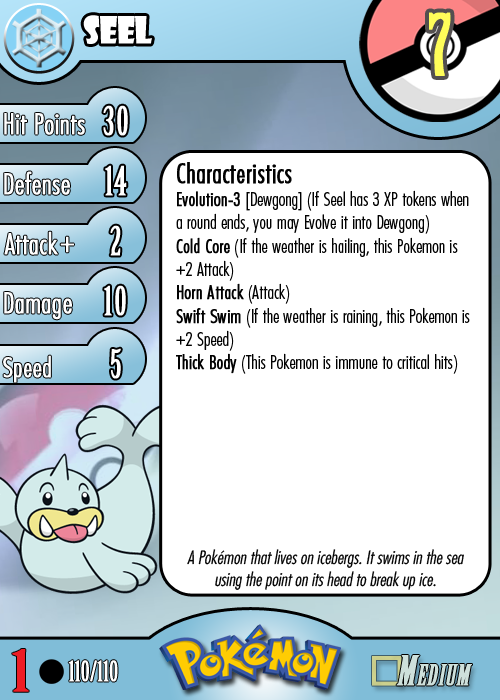
<style>
.page{position:relative;width:500px;height:700px;background:#ffffff}
.page>*{position:absolute;margin:0}
.t1{font:36.7px "ShowcardGothic-Reg";letter-spacing:-0.025em;color:#ffffff;scale:0.91 1}
.t2{font:83.3px "BirchStd";letter-spacing:0.025em;color:#fffd59;font-weight:bold}
.t3{font:27.8px "Futura-CondensedLight";color:#ffffff;font-weight:bold}
.t4{font:38.9px "BirchStd";letter-spacing:0.035em;color:#ffffff;font-weight:bold}
.t5{font:19.4px "FuturaCondensedBQ-Light";color:#010101}
.t6{font:27.8px "FuturaCondensedBQ-Light";color:#010101;font-weight:bold}
.t7{font:19.4px "FuturaCondensedBQ-Light";color:#010101;font-weight:bold}
.t8{font:30.6px "Futura-CondensedLight";color:#ffffff;font-weight:bold}
.t9{font:27.8px "FuturaCondensedBQ-Light";color:#ffffff;font-weight:bold}
.t10{font:18.1px "Futura-CondensedLight";color:#010101;font-style:italic}
.t11{font:55.6px "BirchStd";color:#ed1c24;font-weight:bold;scale:1.5 1}
.t12{font:27.8px "BirchStd";color:#ffffff;font-weight:bold}
</style>
<div class="page">
<p class="t1" style="left:83px;top:15px;width:69px;height:29px">seel</p>
<p class="t2" style="left:429px;top:12px;width:22px;height:64px">7</p>
<p class="t3" style="left:4px;top:113px;width:81px;height:22px">Hit Points</p>
<p class="t4" style="left:103px;top:105px;width:25px;height:31px">30</p>
<p class="t3" style="left:4px;top:171px;width:66px;height:24px">Defense</p>
<p class="t4" style="left:105px;top:165px;width:22px;height:31px">14</p>
<p class="t5" style="left:176px;top:162px;width:294px;height:212px"><span class="t6">Characteristics<br></span><span class="t7">Evolution-3 </span>[Dewgong] (If Seel has 3 XP tokens when a round ends, you may Evolve it into Dewgong)<br><span class="t7">Cold Core</span> (If the weather is hailing, this Pokemon is +2 Attack)<br><span class="t7">Horn Attack</span> (Attack)<br><span class="t7">Swift Swim </span>(If the weather is raining, this Pokemon is +2 Speed)<br><span class="t7">Thick Body</span> (This Pokemon is immune to critical hits)</p>
<p class="t3" style="left:4px;top:231px;width:54px;height:24px">Attack</p>
<p class="t4" style="left:110px;top:225px;width:11px;height:31px">2</p>
<p class="t8" style="left:60px;top:236px;width:14px;height:17px">+</p>
<p class="t3" style="left:4px;top:292px;width:68px;height:28px">Damage</p>
<p class="t4" style="left:104px;top:285px;width:22px;height:31px">10</p>
<p class="t4" style="left:111px;top:348px;width:10px;height:31px">5</p>
<p class="t9" style="left:3px;top:355px;width:48px;height:28px">Speed</p>
<p class="t10" style="left:187px;top:549px;width:277px;height:41px;text-align:center">A Pokémon that lives on icebergs. It swims in the sea using the point on its head to break up ice.</p>
<p class="t11" style="left:12px;top:649px;width:17px;height:43px">1</p>
<p class="t12" style="left:68px;top:660px;width:50px;height:22px">110/110</p>
</div>
